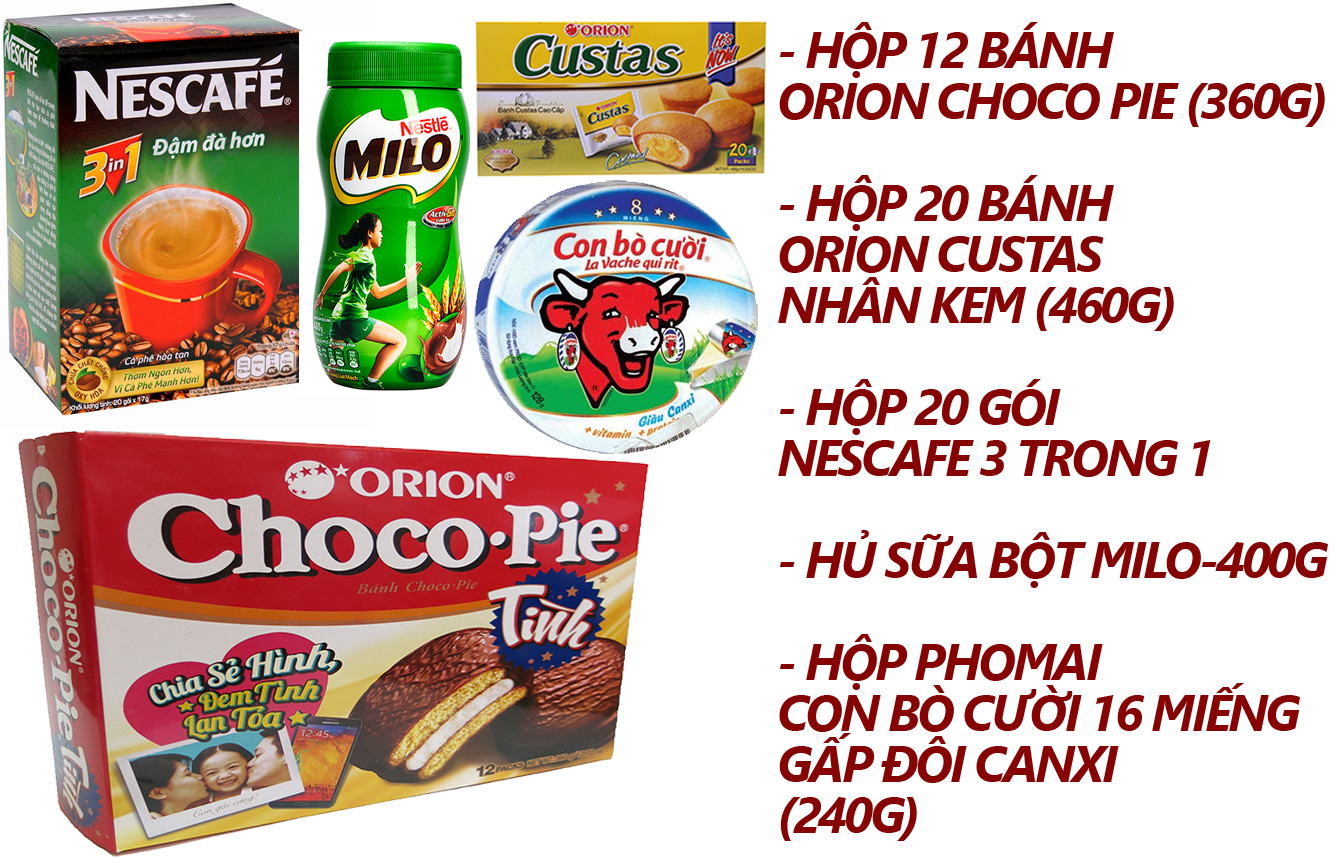
<style>
.page{position:relative;width:1338px;height:864px;background:#ffffff}
.page>*{position:absolute;margin:0}
.t1{font:50px/51px "SegoeUI-BoldItalic";letter-spacing:-0.06em;color:#850303;text-transform:uppercase}
</style>
<div class="page">
<p class="t1" style="left:778px;top:22px;width:550px;height:819px">- Hộp 12 BÁNH <br>ORION CHOCO PIE (360g)<br><br>- Hộp 20 BÁNH <br>ORION CUSTAS <br>NHÂN KEM (460g)<br><br>- Hộp 20 GÓI <br>NESCAFE 3 TRONG 1 <br><br>- Hủ SỮA BỘT MILO-400G<br><br>- Hộp PHOMAI <br>CON BÒ CƯỜI 16 miếng <br>gấp đôi canxi <br>(240g)</p>
</div>
